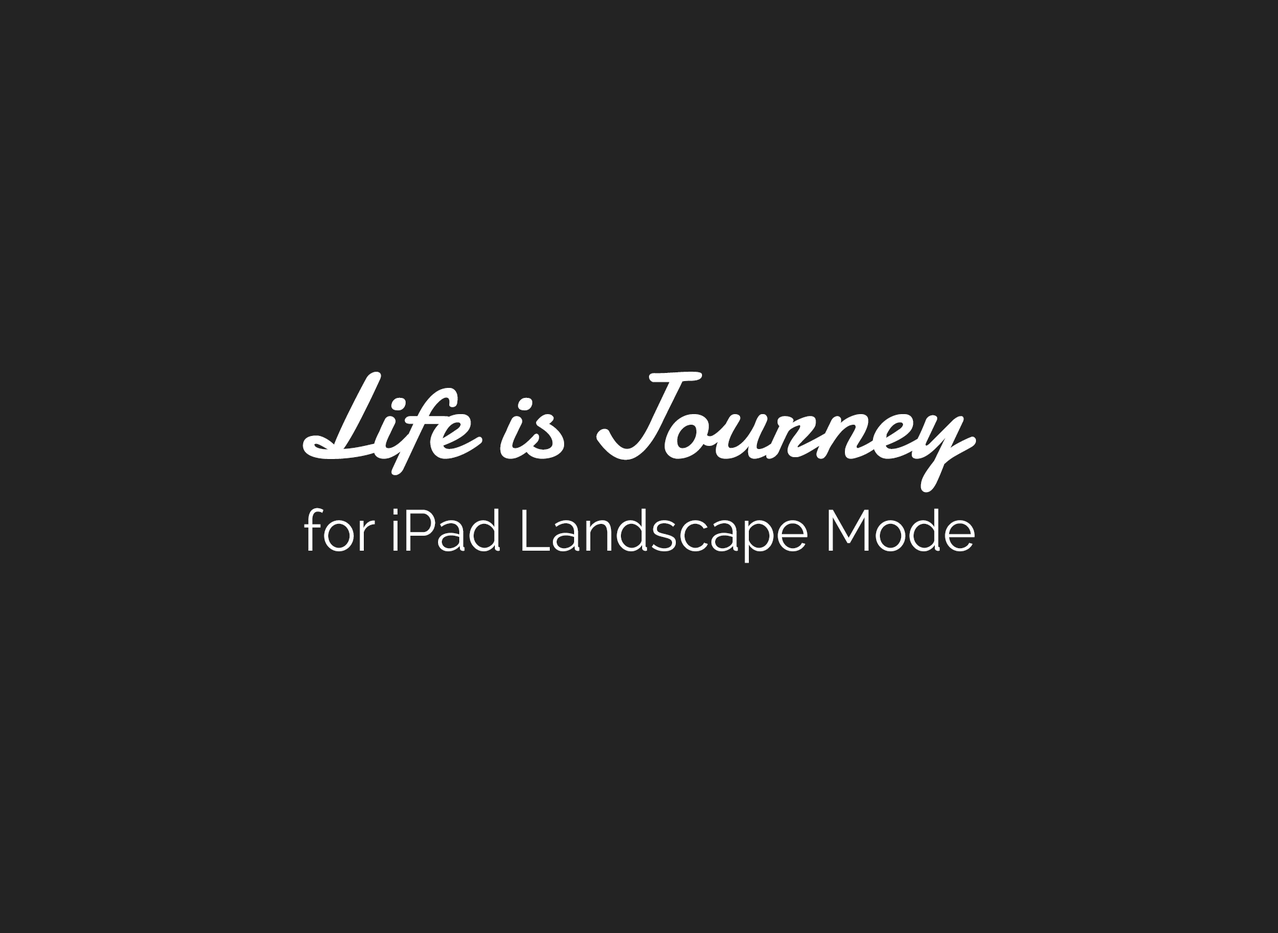
<style>
.page{position:relative;width:1278px;height:933px;background:#232323}
.page>*{position:absolute;margin:0}
.t1{font:121.1px "Damion";color:#ffffff}
.t2{font:57.4px "Raleway-Regular";color:#ffffff}
</style>
<div class="page">
<p class="t1" style="left:303px;top:372px;width:673px;height:121px">Life is Journey</p>
<p class="t2" style="left:304px;top:508px;width:670px;height:55px">for iPad Landscape Mode</p>
</div>
